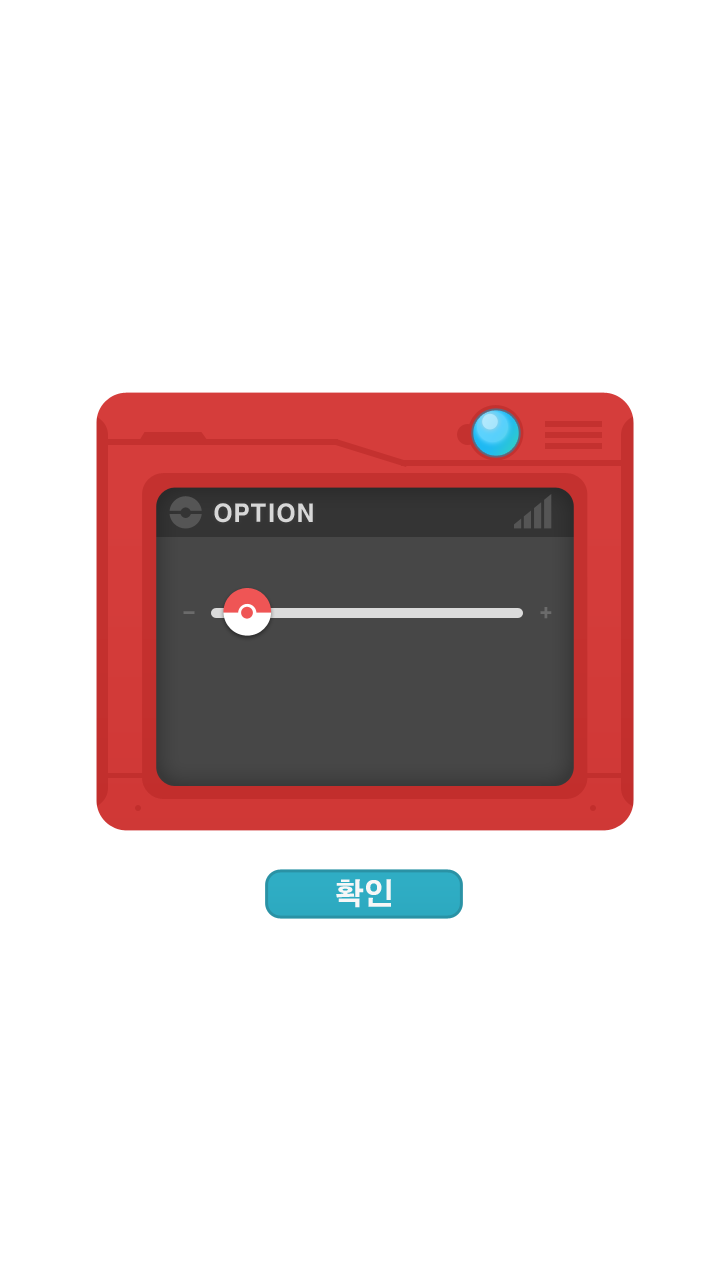
<style>
.page{position:relative;width:720px;height:1280px;background:#ffffff}
.page>*{position:absolute;margin:0}
.t1{font:24px "H2gtrE";color:#d7d7d7}
.t2{font:24px "H2gtrE";color:#6b6b6b}
.t3{font:30px "H2gtrE";color:#f7f7f7}
</style>
<div class="page">
<p class="t1" style="left:214px;top:503px;width:99px;height:20px">OPTION</p>
<p class="t2" style="left:183px;top:611px;width:12px;height:3px">-</p>
<p class="t2" style="left:540px;top:607px;width:12px;height:12px">+</p>
<p class="t3" style="left:336px;top:879px;width:55px;height:29px">확인</p>
</div>
